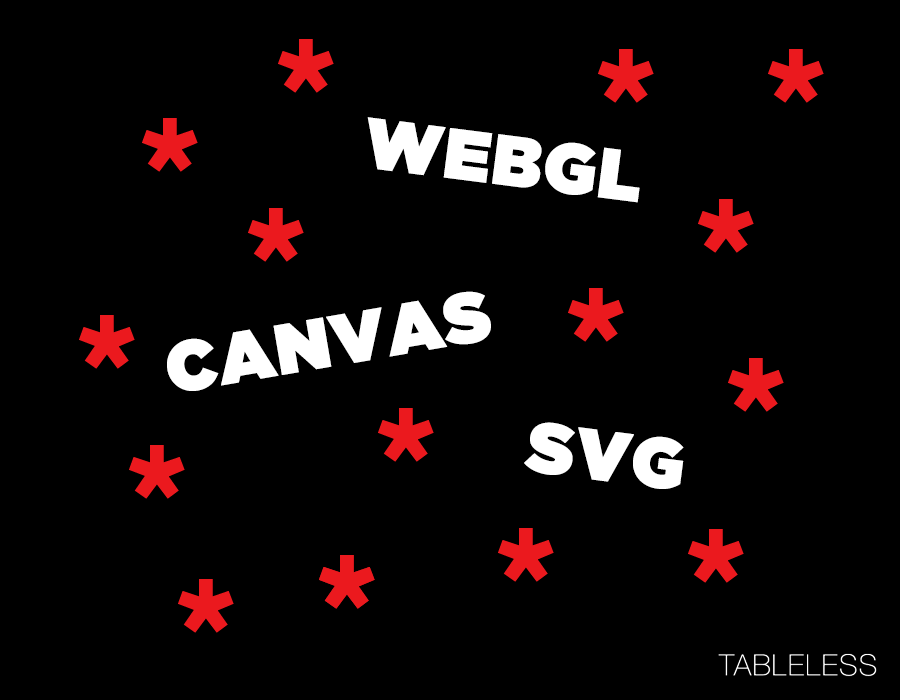
<style>
.page{position:relative;width:900px;height:700px;background:#000000}
.page>*{position:absolute;margin:0}
.t1{font:70.5px "GothamUltra";color:#ffffff;font-weight:bold}
</style>
<div class="page">
<p class="t1" style="left:367px;top:117px;width:273px;height:86px;rotate:7deg">WEBGL</p>
<p class="t1" style="left:167px;top:291px;width:324px;height:100px;rotate:-10deg">CANVAS</p>
<p class="t1" style="left:524px;top:422px;width:160px;height:67px;rotate:7deg">SVG</p>
</div>
